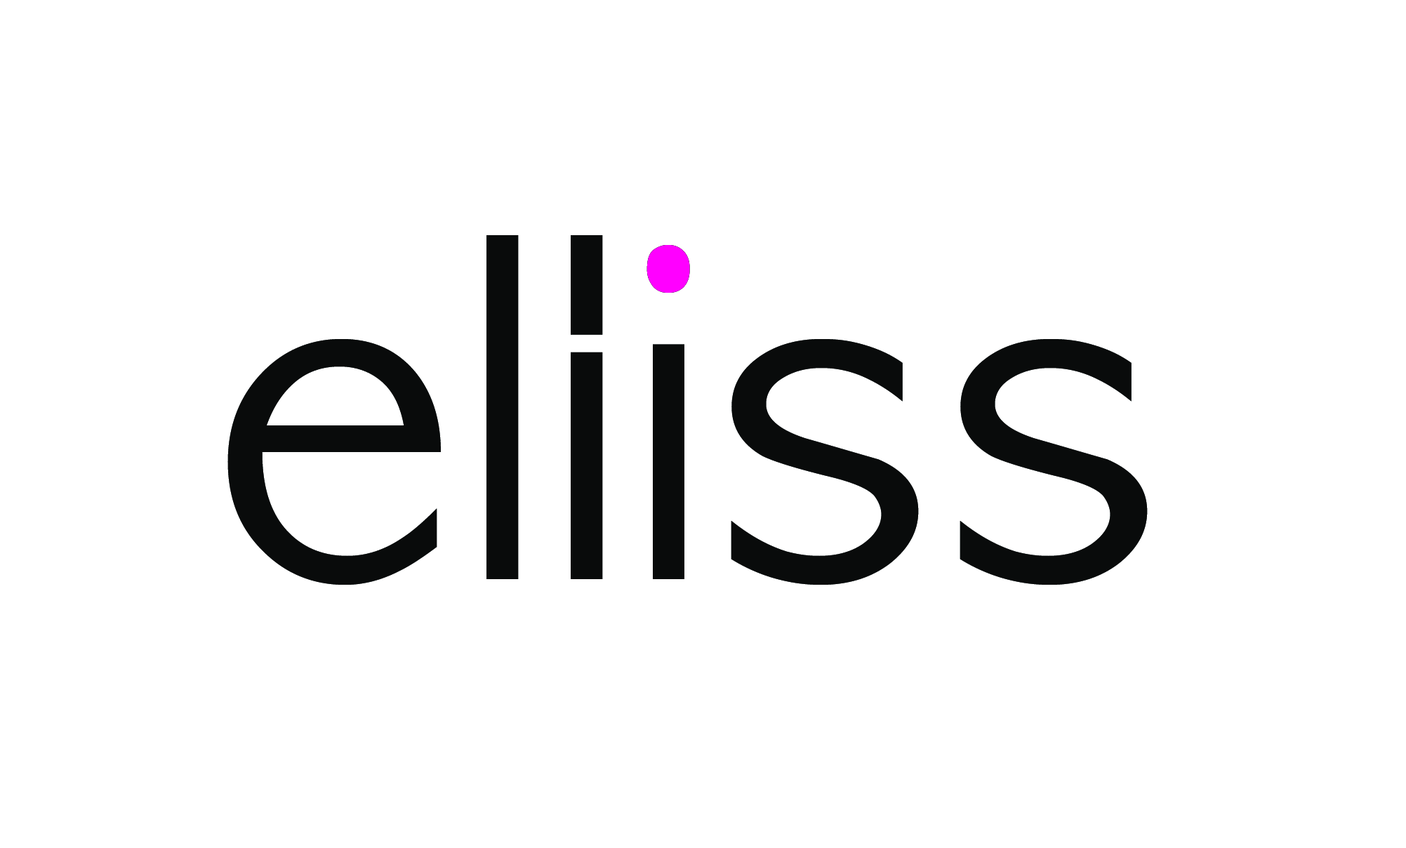
<style>
.page{position:relative;width:1406px;height:848px;background:#ffffff}
.page>*{position:absolute;margin:0}
.t1{font:438.8px "AppleGothic";letter-spacing:0.025em;color:#090b0b}
</style>
<div class="page">
<p class="t1" style="left:227px;top:235px;width:921px;height:350px">elliss</p>
</div>
